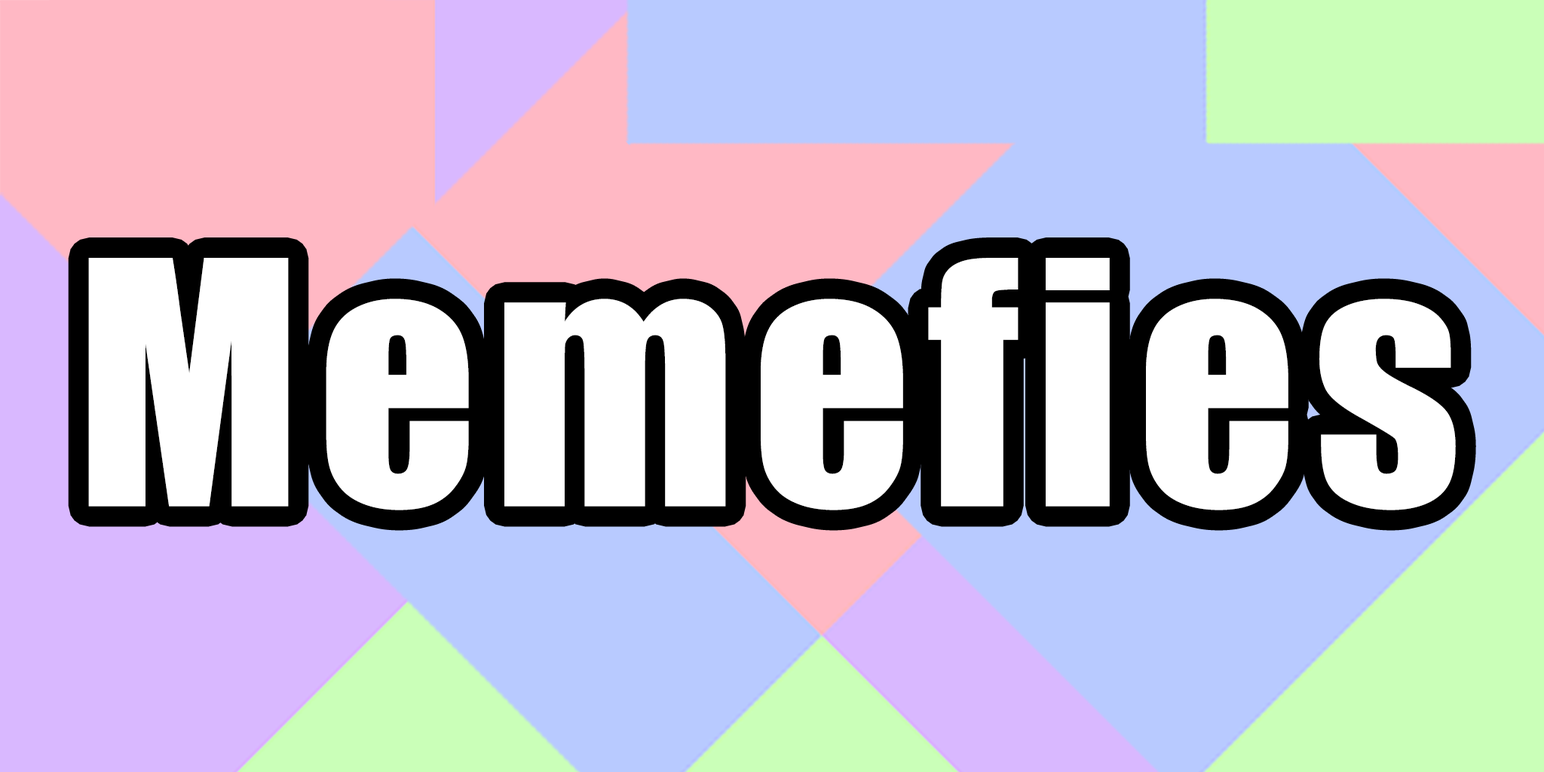
<style>
.page{position:relative;width:1544px;height:772px;background:#b8caff}
.page>*{position:absolute;margin:0}
.t1{font:314.2px "Impact";letter-spacing:0.05em;color:#ffffff}
</style>
<div class="page">
<p class="t1" style="left:88px;top:258px;width:1368px;height:252px">Memefies</p>
</div>
